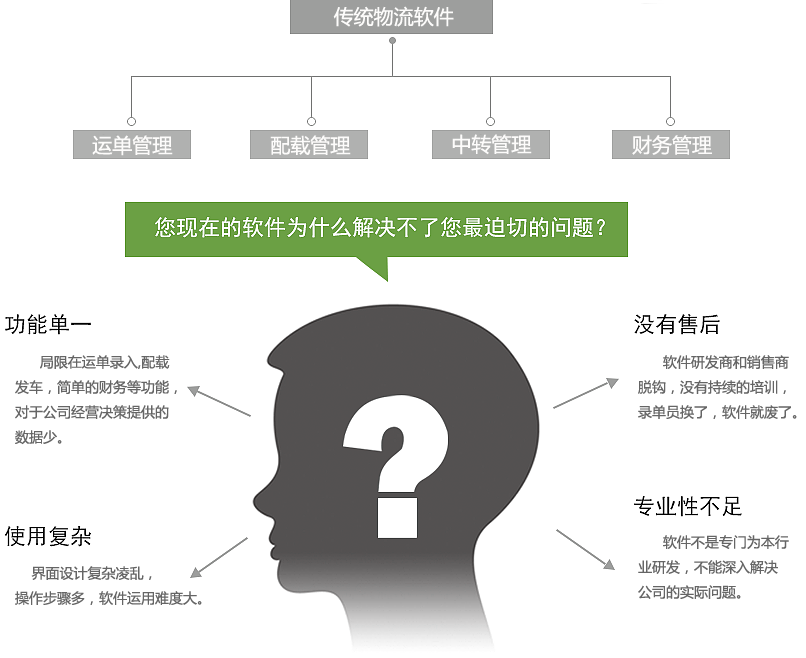
<style>
.page{position:relative;width:806px;height:658px;background:#ffffff}
.page>*{position:absolute;margin:0}
.t1{font:20px "MicrosoftYaHei";color:#fdfcfb}
.t2{font:14px/25px "MicrosoftYaHei";color:#656565}
.t3{font:14px/18px "MicrosoftYaHei";color:#656565}
</style>
<div class="page">
<p class="t1" style="left:333px;top:6px;width:121px;height:21px">传统物流软件</p>
<p class="t1" style="left:92px;top:135px;width:81px;height:21px">运单管理</p>
<p class="t1" style="left:270px;top:135px;width:81px;height:20px">配载管理</p>
<p class="t1" style="left:452px;top:134px;width:80px;height:21px">中转管理</p>
<p class="t1" style="left:632px;top:135px;width:80px;height:20px">财务管理</p>
<p class="t2" style="left:15px;top:355px;width:162px;height:90px"><span class="t3">      </span>局限在运单录入,配载<br>发车，简单的财务等功能，<br>对于公司经营决策提供的<br>数据少。</p>
<p class="t2" style="left:638px;top:355px;width:159px;height:64px">软件研发商和销售商<br>脱钩，没有持续的培训，<br>录单员换了，软件就废了。</p>
<p class="t2" style="left:638px;top:535px;width:151px;height:64px">软件不是专门为本行<br>业研发，不能深入解决<br>公司的实际问题。</p>
<p class="t2" style="left:15px;top:566px;width:187px;height:39px">界面设计复杂凌乱，<br>操作步骤多，软件运用难度大。</p>
</div>
